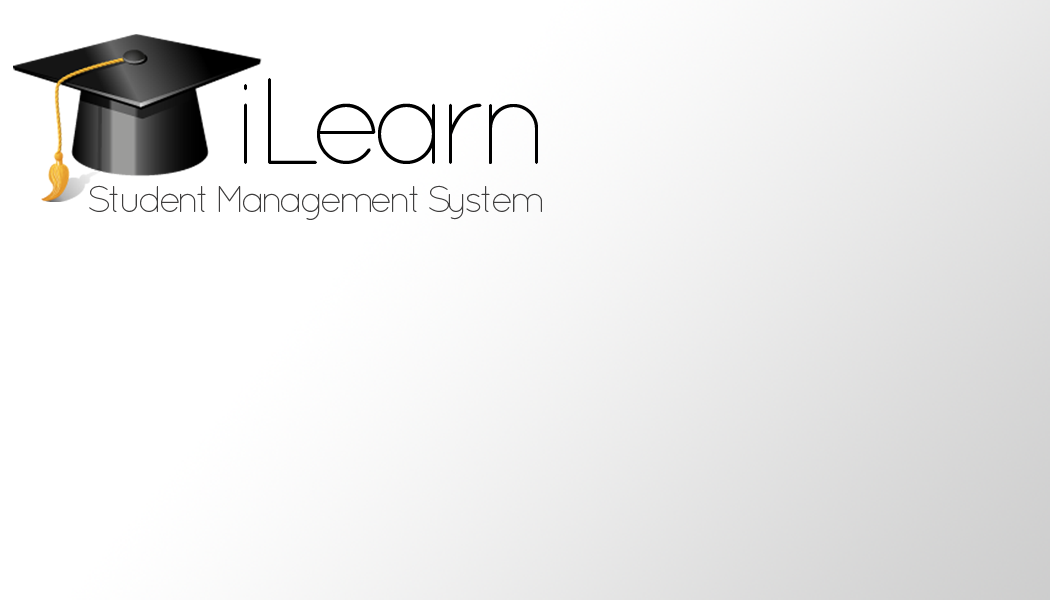
<style>
.page{position:relative;width:1050px;height:600px;background:#ffffff}
.page>*{position:absolute;margin:0}
.t1{font:123px "QuicksandLight-Regular";letter-spacing:-0.1em;color:#000000}
.t2{font:36.9px "QuicksandLight-Regular";letter-spacing:-0.1em;color:#3f3e3e}
</style>
<div class="page">
<p class="t1" style="left:244px;top:78px;width:294px;height:86px">iLearn</p>
<p class="t2" style="left:89px;top:185px;width:453px;height:35px">Student Management System</p>
</div>
